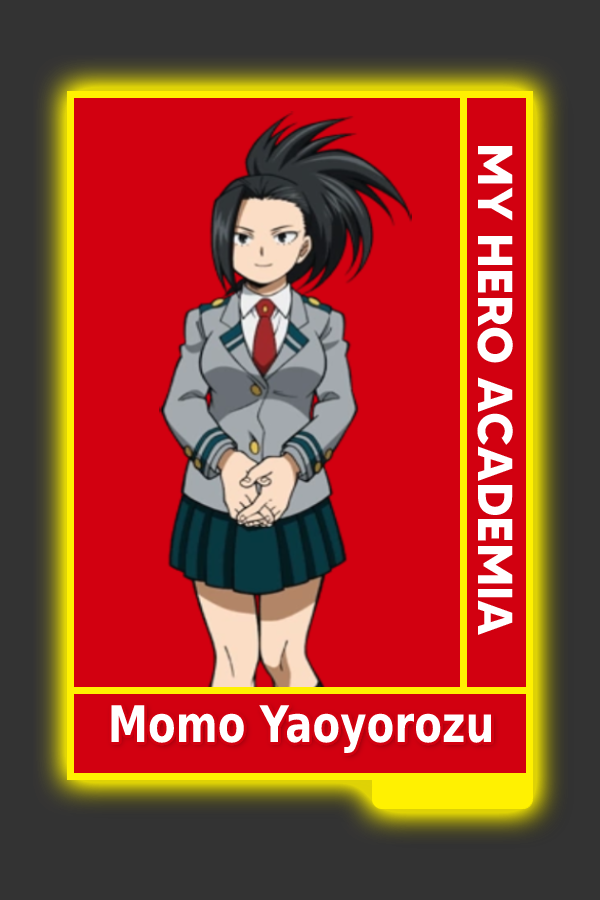
<style>
.page{position:relative;width:600px;height:900px;background:#d20010}
.page>*{position:absolute;margin:0}
.t1{font:48.8px "MADETOMMY-Bold";color:#ffffff}
.t2{font:50.5px "MADETOMMY-Bold";color:#ffffff;scale:0.8 1}
</style>
<div class="page">
<p class="t1" style="left:477px;top:146px;width:36px;height:489px;rotate:90deg">MY HERO ACADEMIA</p>
<p class="t2" style="left:111px;top:705px;width:380px;height:48px">Momo Yaoyorozu</p>
</div>
